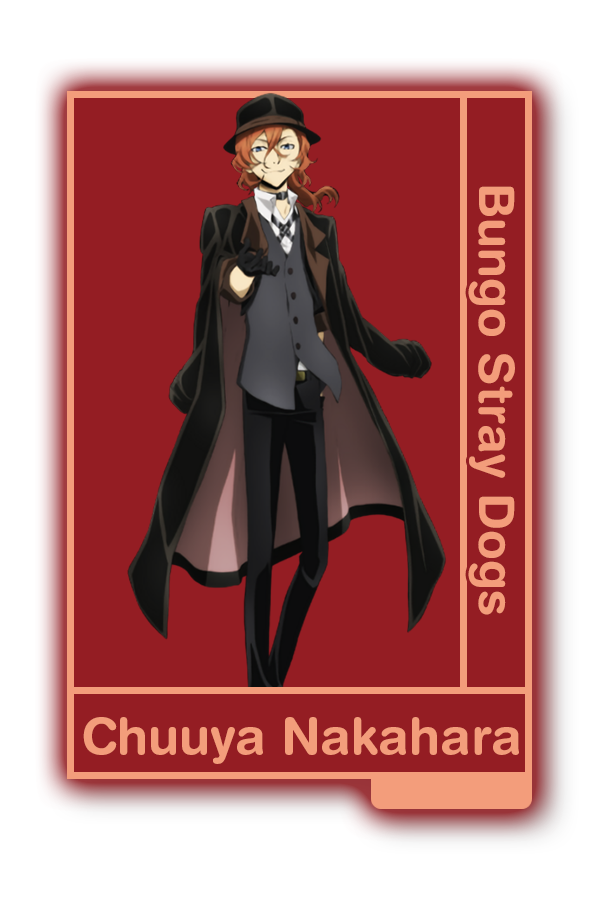
<style>
.page{position:relative;width:600px;height:900px;background:#941d23}
.page>*{position:absolute;margin:0}
.t1{font:48.8px "HelveticaRounded-Bold";color:#f39d7b}
.t2{font:50.5px "HelveticaRounded-Bold";color:#f39d7b}
</style>
<div class="page">
<p class="t1" style="left:468px;top:186px;width:47px;height:429px;rotate:90deg">Bungo Stray Dogs</p>
<p class="t2" style="left:83px;top:717px;width:436px;height:47px">Chuuya Nakahara</p>
</div>
